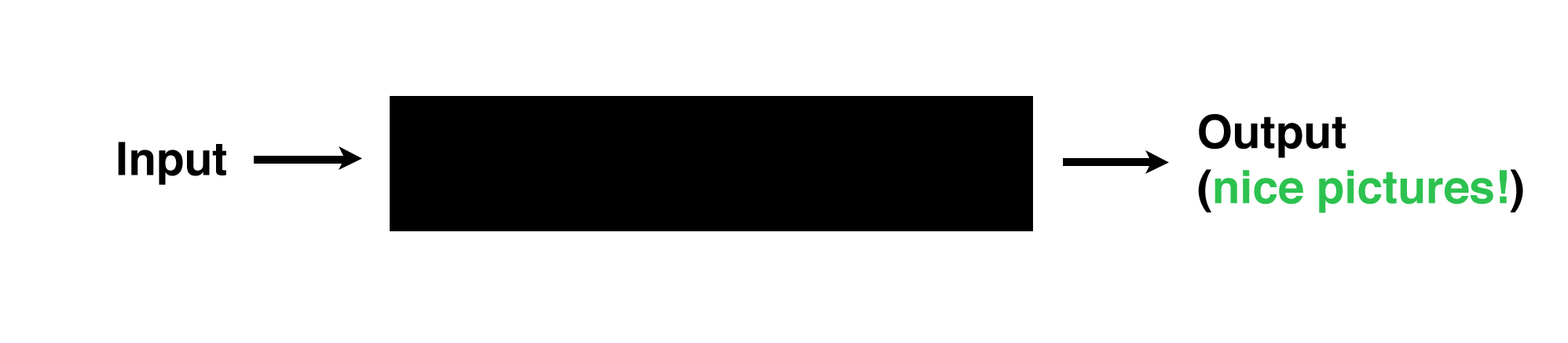
<style>
.page{position:relative;width:1568px;height:343px;background:#ffffff}
.page>*{position:absolute;margin:0}
.t1{font:45.8px "Helvetica-Bold";color:#2dc250}
.t2{font:45.8px "Helvetica-Bold";color:#000000}
</style>
<div class="page">
<p class="t1" style="left:1198px;top:114px;width:325px;height:99px"><span class="t2">Output <br>(</span>nice pictures!<span class="t2">)</span></p>
<p class="t2" style="left:118px;top:141px;width:108px;height:44px">Input</p>
</div>
